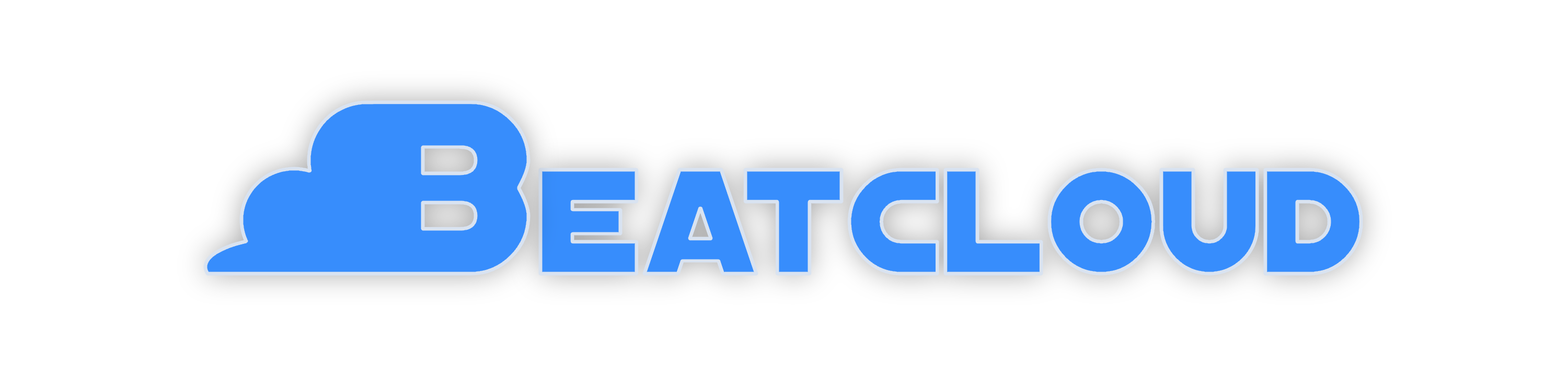
<style>
.page{position:relative;width:1568px;height:376px;background:#ffffff}
.page>*{position:absolute;margin:0}
.t1{font:159.9px "DistantGalaxy";color:#378dfc}
</style>
<div class="page">
<p class="t1" style="left:540px;top:170px;width:822px;height:104px">eatcloud</p>
</div>
